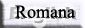
<style>
.page{position:relative;width:85px;height:28px}
.page>*{position:absolute;margin:0}
.t1{font:18px "TimesNewRomanPSMT";color:#000000}
</style>
<div class="page">
<p class="t1" style="left:15px;top:5px;width:60px;height:13px">Romana</p>
</div>
